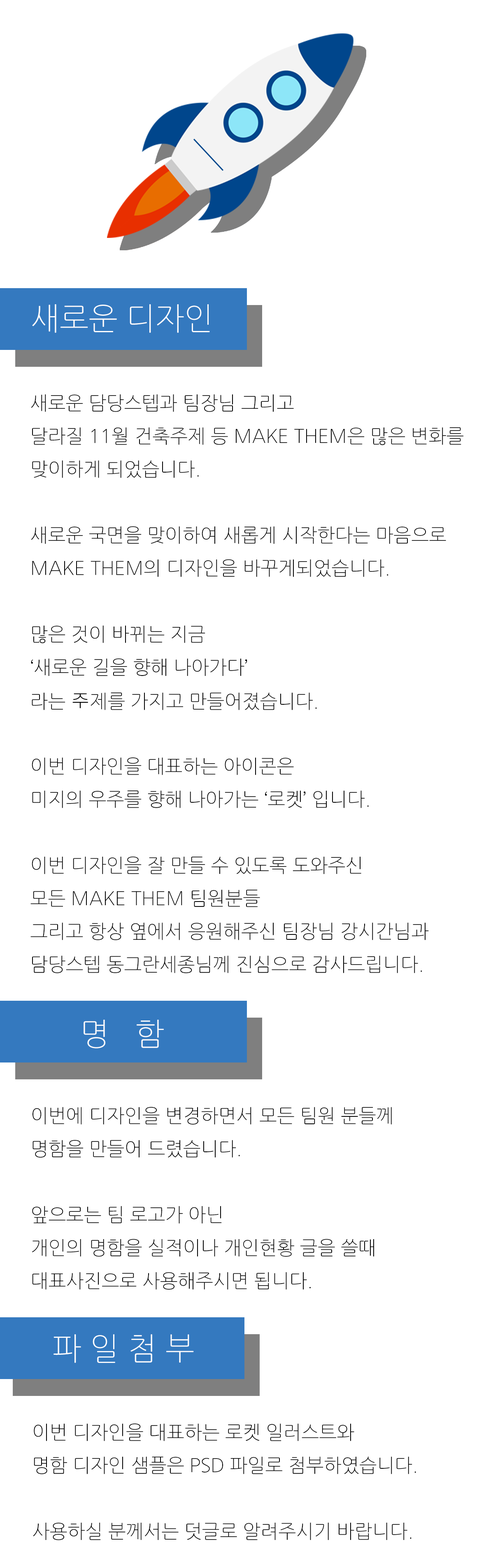
<style>
.page{position:relative;width:486px;height:1568px;background:#ffffff}
.page>*{position:absolute;margin:0}
.t1{font:30.9px "NanumGothicLight";color:#fffefe}
.t2{font:18.9px "NanumGothicLight";color:#000000}
.t3{font:18.9px "Gulim";color:#000000}
.t4{font:30.9px "NanumGothicLight";color:#ffffff}
</style>
<div class="page">
<p class="t1" style="left:32px;top:304px;width:178px;height:29px">새로운 디자인</p>
<p class="t2" style="left:30px;top:394px;width:434px;height:579px">새로운 담당스텝과 팀장님 그리고 <br>달라질 11월 건축주제 등 MAKE THEM은 많은 변화를 <br>맞이하게 되었습니다.<br><br>새로운 국면을 맞이하여 새롭게 시작한다는 마음으로<br>MAKE THEM의 디자인을 바꾸게되었습니다.<br><br>많은 것이 바뀌는 지금<br>‘새로운 길을 향해 나아가다’<br>라는 <span class="t3">주</span>제를 가지고 만들어졌습니다.<br><br>이번 디자인을 대표하는 아이콘은<br>미지의 우주를 향해 나아가는 ‘로켓’ 입니다.<br><br>이번 디자인을 잘 만들 수 있도록 도와주신<br>모든 MAKE THEM 팀원분들 <br>그리고 항상 옆에서 응원해주신 팀장님 강시간님과 <br>담당스텝 동그란세종님께 진심으로 감사드립니다.</p>
<p class="t1" style="left:84px;top:1020px;width:80px;height:28px">명   함</p>
<p class="t2" style="left:32px;top:1107px;width:360px;height:183px">이번에 디자인을 변경하면서 모든 팀원 분들께<br>명함을 만들어 드렸습니다.<br><br>앞으로는 팀 로고가 아닌 <br>개인의 명함을 실적이나 개인현황 글을 쓸때<br>대표사진으로 사용해주시면 됩니다.</p>
<p class="t4" style="left:54px;top:1334px;width:140px;height:29px">파 일 첨 부</p>
<p class="t2" style="left:33px;top:1424px;width:383px;height:116px">이번 디자인을 대표하는 로켓 일러스트와<br>명함 디자인 샘플은 PSD 파일로 첨부하였습니다.<br><br>사용하실 분께서는 덧글로 알려주시기 바랍니다.</p>
</div>
